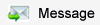
<style>
.page{position:relative;width:100px;height:25px;background:#f5f5f5}
.page>*{position:absolute;margin:0}
.t1{font:14px "ArialMT";color:#030006}
</style>
<div class="page">
<p class="t1" style="left:39px;top:8px;width:56px;height:13px">Message</p>
</div>
